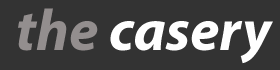
<style>
.page{position:relative;width:280px;height:70px;background:#333333}
.page>*{position:absolute;margin:0}
.t1{font:58.3px "MyriadPro-BoldIt";color:#ffffff}
.t2{font:58.3px "MyriadPro-BoldIt";color:#938e8e}
</style>
<div class="page">
<p class="t1" style="left:18px;top:8px;width:255px;height:56px"><span class="t2">the</span> casery</p>
</div>
